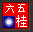
<style>
.page{position:relative;width:33px;height:32px;background:#f20000}
.page>*{position:absolute;margin:0}
.t1{font:10.4px "SimSun";color:#ffffff}
.t2{font:11.7px "SimSun";color:#ffffff}
</style>
<div class="page">
<p class="t1" style="left:5px;top:4px;width:20px;height:9px">六五</p>
<p class="t2" style="left:16px;top:15px;width:11px;height:12px">桂</p>
</div>
